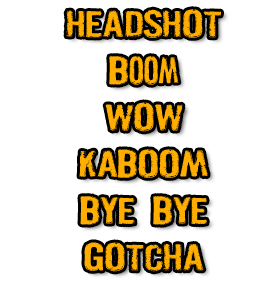
<style>
.page{position:relative;width:270px;height:288px;background:#ffffff}
.page>*{position:absolute;margin:0}
.t1{font:36px/46.7px "Pistolgrip";color:#ffae00}
</style>
<div class="page">
<p class="t1" style="left:66px;top:9px;width:155px;height:263px;text-align:center">HEADSHOT<br>Boom<br>WOW<br>KABOOM<br>BYE BYE<br>GOTCHA</p>
</div>
